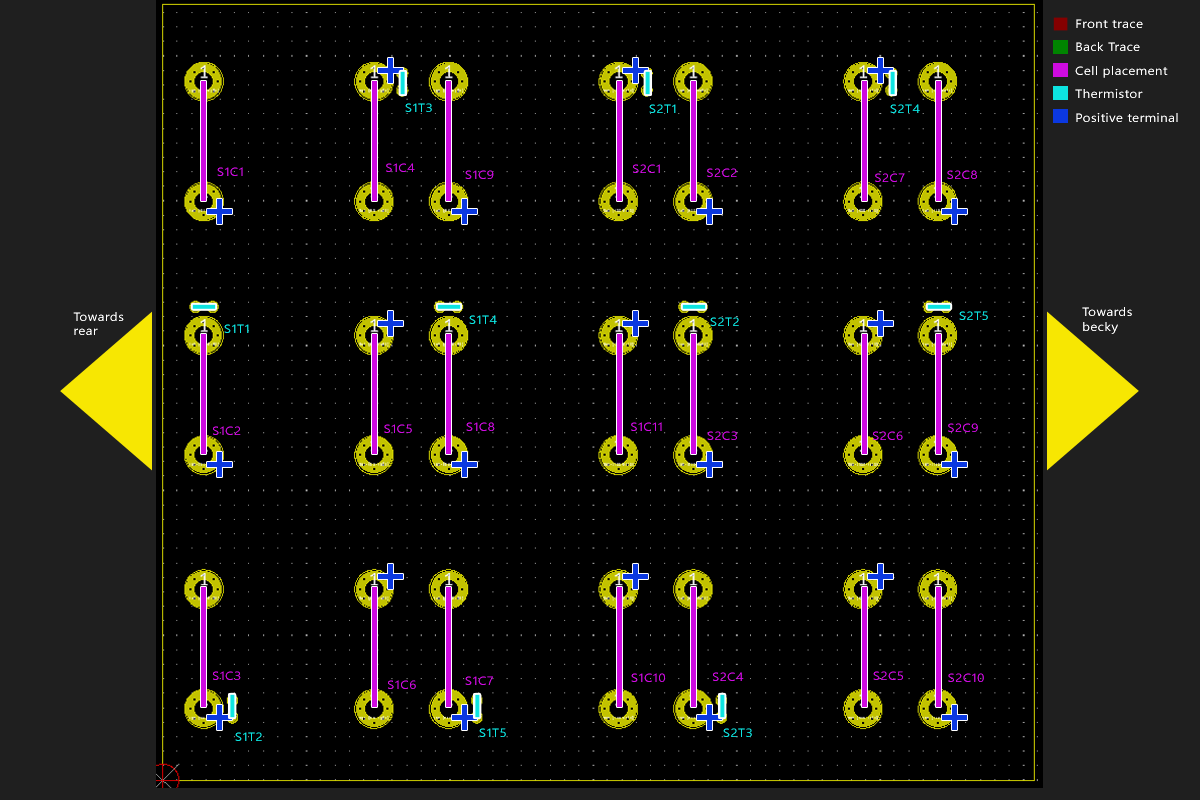
<style>
.page{position:relative;width:1200px;height:800px;background:#000000}
.page>*{position:absolute;margin:0}
.t1{font:12px "SegoeUI";letter-spacing:0.04em;color:#0de4e1;scale:1.1 1}
.t2{font:12px "SegoeUI";letter-spacing:0.04em;color:#ce0be0;scale:1.1 1}
.t3{font:12px "SegoeUI";letter-spacing:0.04em;color:#ffffff;scale:1.1 1}
</style>
<div class="page">
<p class="t1" style="left:405px;top:103px;width:27px;height:9px">S1T3</p>
<p class="t1" style="left:649px;top:104px;width:27px;height:9px">S2T1</p>
<p class="t1" style="left:890px;top:104px;width:30px;height:9px">S2T4</p>
<p class="t2" style="left:217px;top:167px;width:26px;height:9px">S1C1</p>
<p class="t2" style="left:386px;top:163px;width:29px;height:9px">S1C4</p>
<p class="t2" style="left:465px;top:170px;width:29px;height:9px">S1C9</p>
<p class="t2" style="left:633px;top:164px;width:27px;height:9px">S2C1</p>
<p class="t2" style="left:707px;top:168px;width:30px;height:9px">S2C2</p>
<p class="t2" style="left:875px;top:173px;width:30px;height:9px">S2C7</p>
<p class="t2" style="left:947px;top:170px;width:30px;height:9px">S2C8</p>
<p class="t3" style="left:73px;top:312px;width:51px;height:23px">Towards<br>rear</p>
<p class="t1" style="left:469px;top:315px;width:28px;height:9px">S1T4</p>
<p class="t1" style="left:710px;top:317px;width:29px;height:9px">S2T2</p>
<p class="t1" style="left:959px;top:311px;width:29px;height:9px">S2T5</p>
<p class="t3" style="left:1082px;top:307px;width:50px;height:27px">Towards<br>becky</p>
<p class="t1" style="left:224px;top:324px;width:25px;height:9px">S1T1</p>
<p class="t2" style="left:384px;top:424px;width:28px;height:9px">S1C5</p>
<p class="t2" style="left:466px;top:422px;width:29px;height:9px">S1C8</p>
<p class="t2" style="left:631px;top:422px;width:31px;height:9px">S1C11</p>
<p class="t2" style="left:948px;top:423px;width:30px;height:9px">S2C9</p>
<p class="t2" style="left:213px;top:426px;width:28px;height:9px">S1C2</p>
<p class="t2" style="left:707px;top:431px;width:30px;height:9px">S2C3</p>
<p class="t2" style="left:873px;top:431px;width:30px;height:9px">S2C6</p>
<p class="t2" style="left:213px;top:671px;width:28px;height:9px">S1C3</p>
<p class="t2" style="left:465px;top:676px;width:28px;height:9px">S1C7</p>
<p class="t2" style="left:631px;top:673px;width:34px;height:9px">S1C10</p>
<p class="t2" style="left:713px;top:672px;width:31px;height:9px">S2C4</p>
<p class="t2" style="left:873px;top:671px;width:30px;height:9px">S2C5</p>
<p class="t2" style="left:948px;top:673px;width:36px;height:9px">S2C10</p>
<p class="t2" style="left:388px;top:680px;width:28px;height:9px">S1C6</p>
<p class="t1" style="left:235px;top:732px;width:27px;height:9px">S1T2</p>
<p class="t1" style="left:479px;top:728px;width:27px;height:9px">S1T5</p>
<p class="t1" style="left:723px;top:728px;width:29px;height:9px">S2T3</p>
</div>
